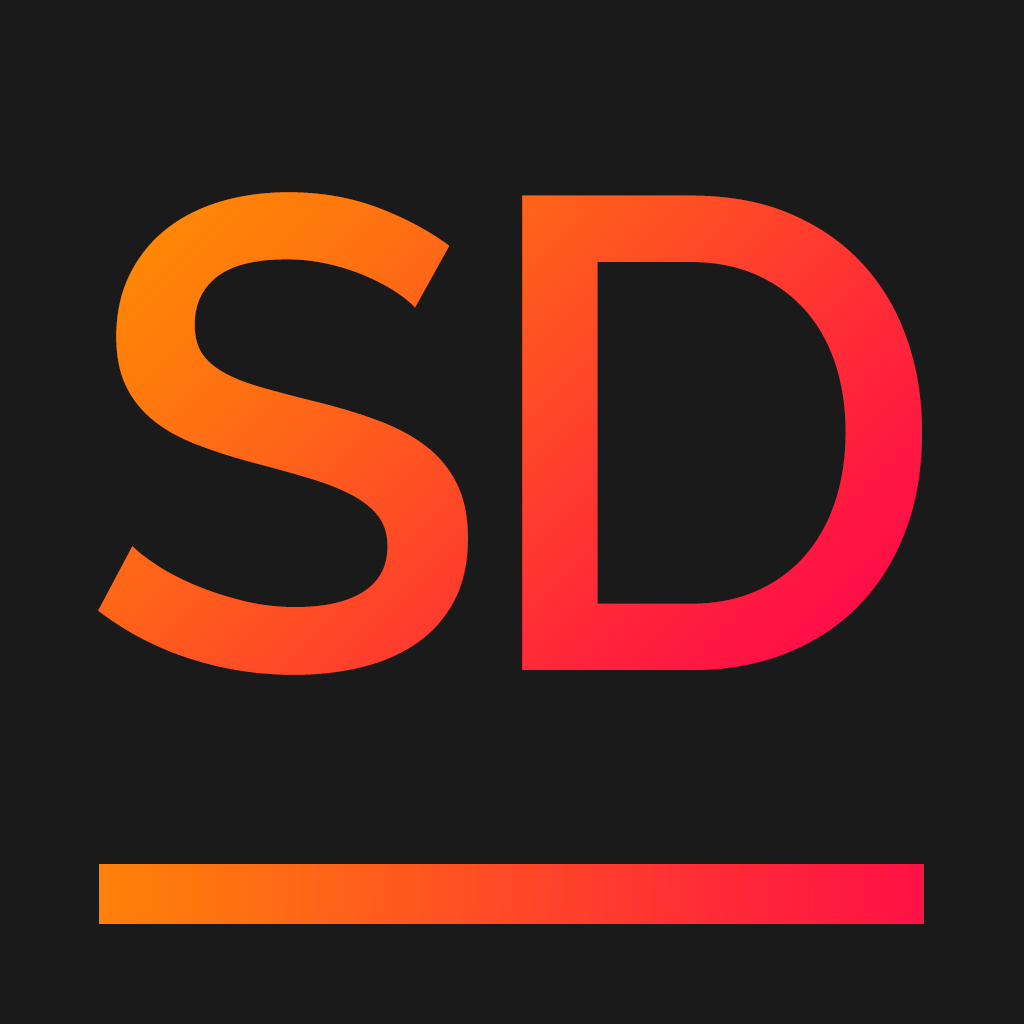
<style>
.page{position:relative;width:1024px;height:1024px;background:#1a1a1a}
.page>*{position:absolute;margin:0}
.t1{font:668px "Raleway-SemiBold";letter-spacing:-0.03em}
</style>
<div class="page">
<p class="t1" style="left:98px;top:192px;width:824px;height:483px">SD</p>
</div>
